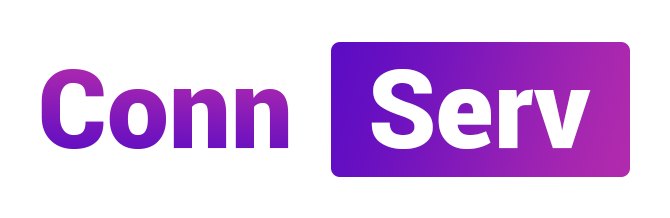
<style>
.page{position:relative;width:670px;height:218px;background:#ffffff}
.page>*{position:absolute;margin:0}
.t1{font:110px "Roboto-Black";color:#841ab9}
.t2{font:110px "Roboto-Black";color:#ffffff}
</style>
<div class="page">
<p class="t1" style="left:41px;top:69px;width:248px;height:80px">Conn</p>
<p class="t2" style="left:371px;top:69px;width:220px;height:80px">Serv</p>
</div>
